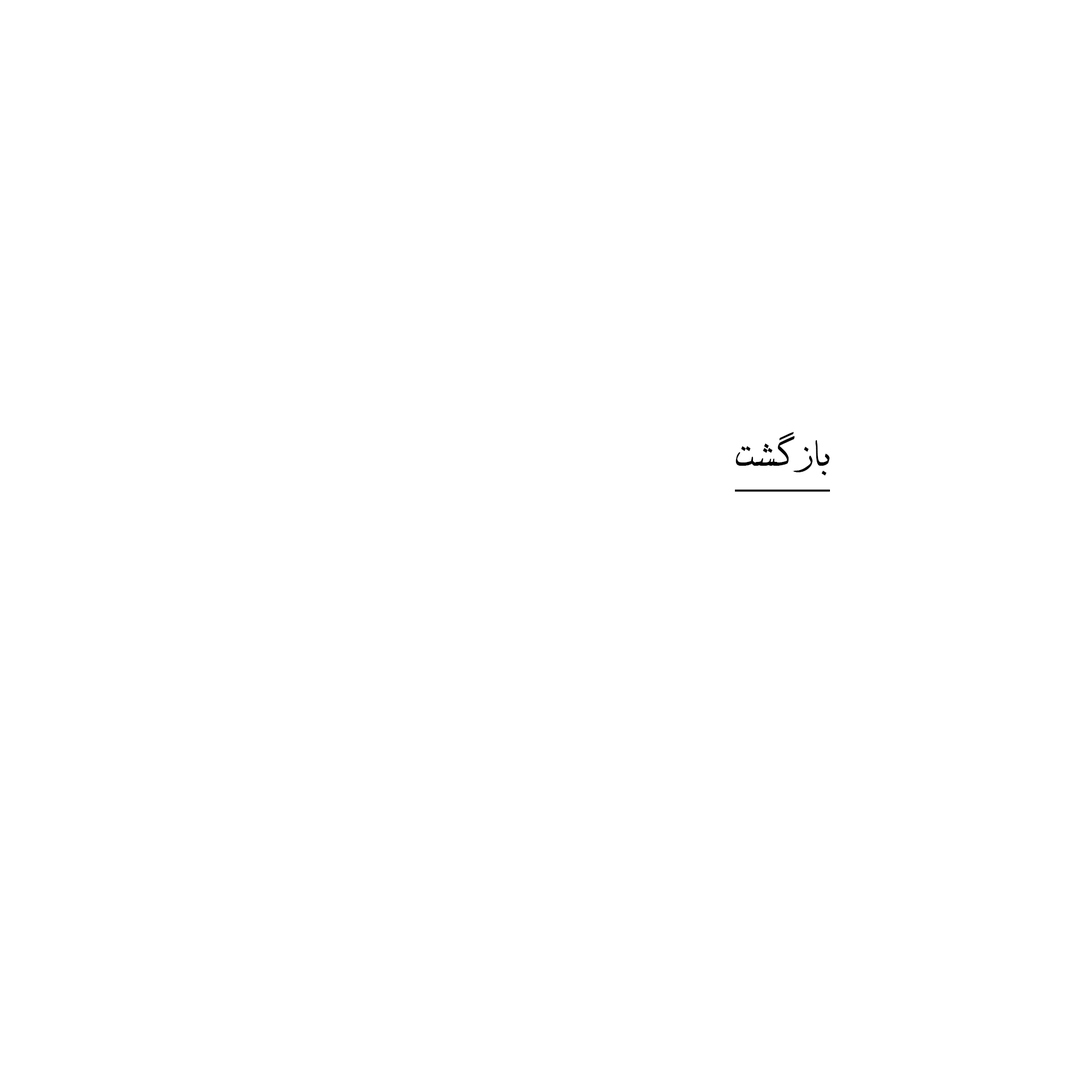
<style>
.page{position:relative;width:1092px;height:1092px;background:#ffffff}
.page>*{position:absolute;margin:0}
.t1{font:43.7px "BDavat";color:#000000;text-decoration:underline;scale:0.93 1}
</style>
<div class="page">
<p class="t1" style="left:735px;top:432px;width:95px;height:60px">بازگشت</p>
</div>
